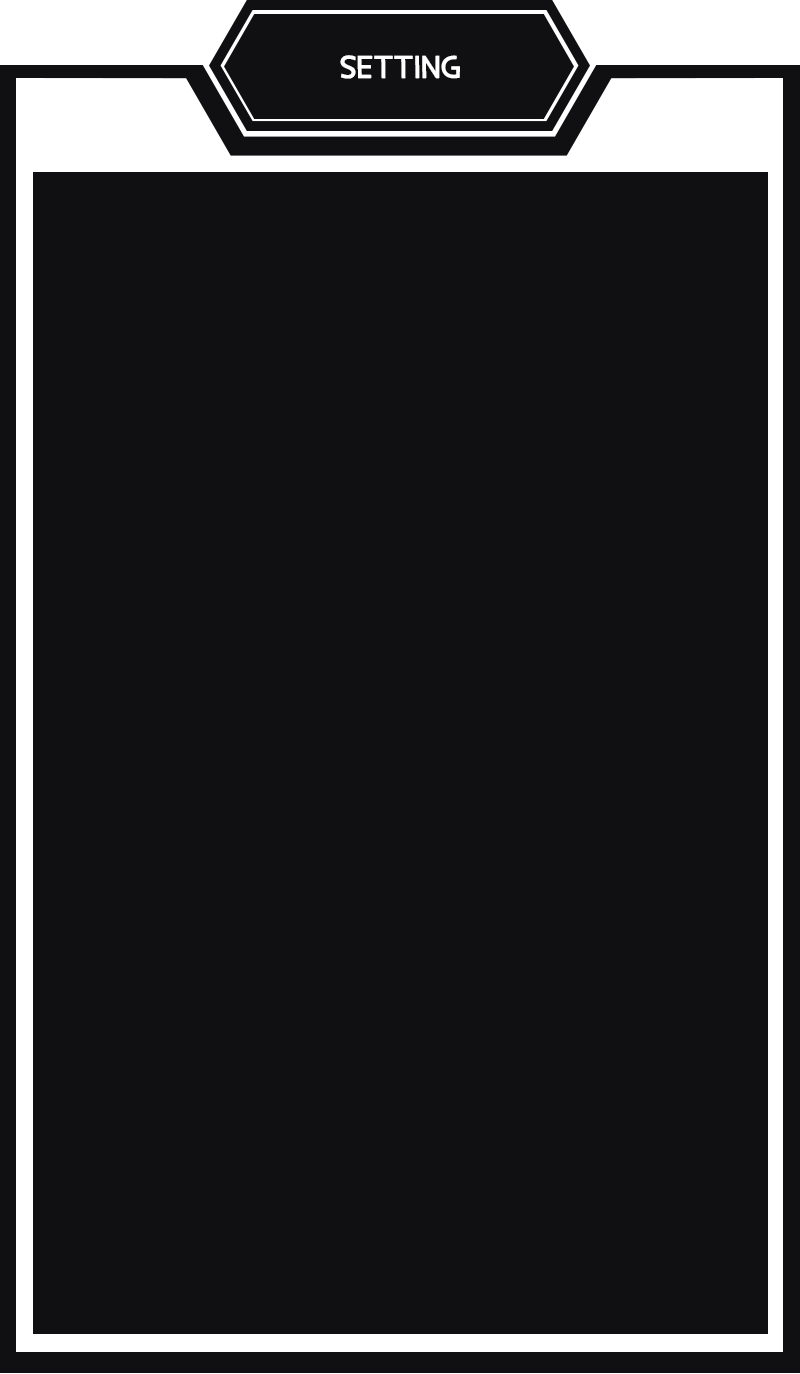
<style>
.page{position:relative;width:800px;height:1374px;background:#100f11}
.page>*{position:absolute;margin:0}
.t1{font:29.9px "CookieRun-Regular";letter-spacing:-0.02em;color:#ffffff;text-transform:uppercase}
</style>
<div class="page">
<p class="t1" style="left:340px;top:55px;width:120px;height:24px">Setting</p>
</div>
